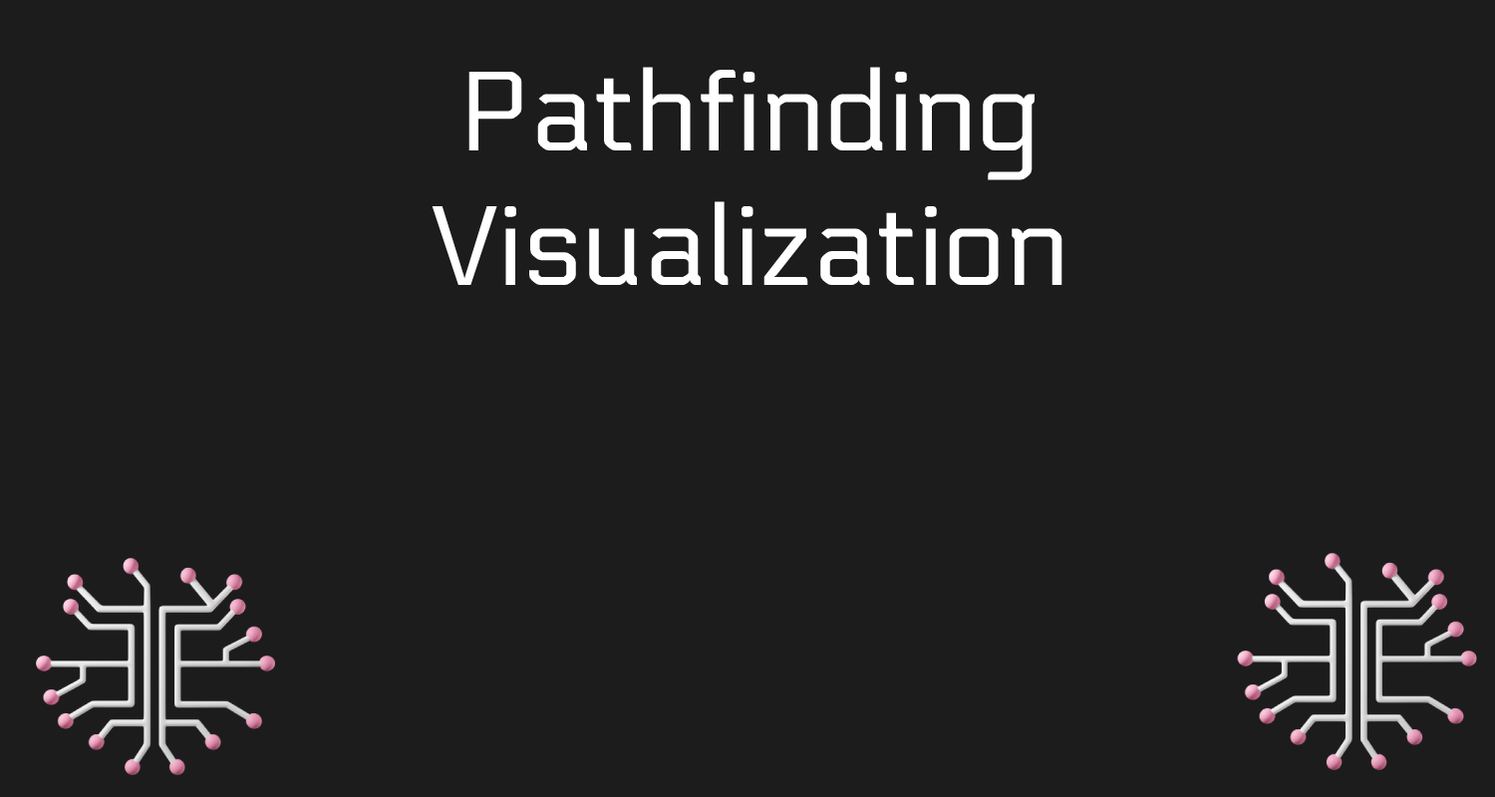
<style>
.page{position:relative;width:1495px;height:797px;background:#1c1c1c}
.page>*{position:absolute;margin:0}
.t1{font:112.6px "Electrolize-Regular";color:#ffffff}
</style>
<div class="page">
<p class="t1" style="left:432px;top:67px;width:631px;height:218px;text-align:center">Pathfinding Visualization</p>
</div>
